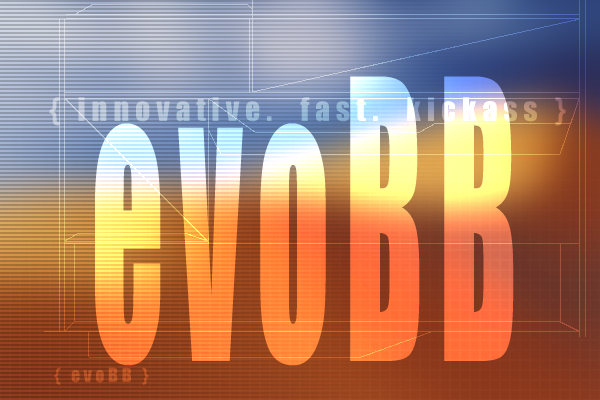
<style>
.page{position:relative;width:600px;height:400px}
.page>*{position:absolute;margin:0}
.t1{font:360px "Impact";letter-spacing:0.2em;scale:0.4 1}
.t2{font:30px "Impact";letter-spacing:0.2em}
.t3{font:18px "Impact";letter-spacing:0.2em;color:#b55024}
</style>
<div class="page">
<p class="t1" style="left:95px;top:76px;width:419px;height:290px">evoBB</p>
<p class="t2" style="left:49px;top:97px;width:517px;height:29px">{ innovative.  fast.  kickass }</p>
<p class="t3" style="left:54px;top:367px;width:95px;height:18px">{ evoBB }</p>
</div>
